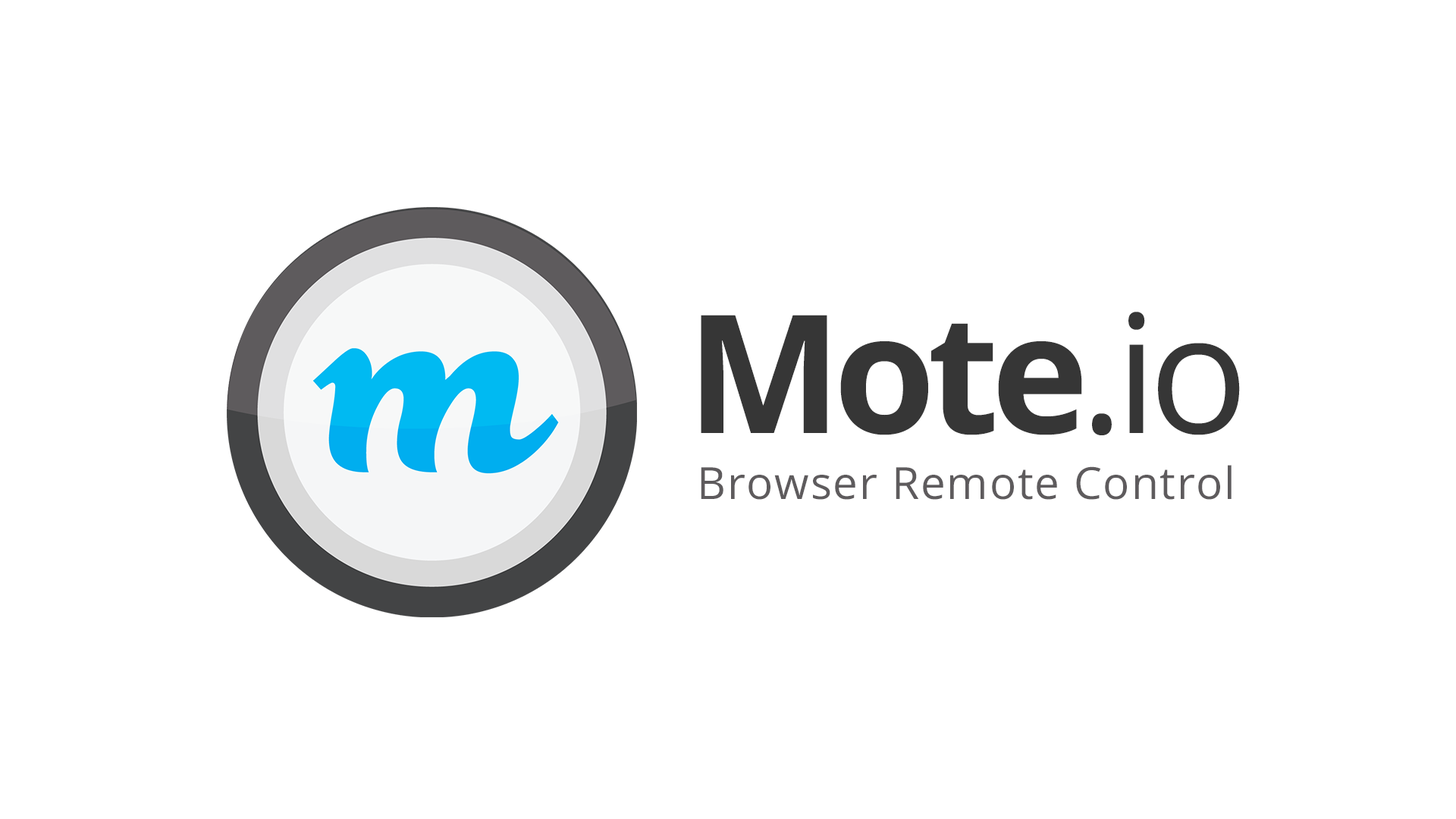
<style>
.page{position:relative;width:1456px;height:819px;background:#ffffff}
.page>*{position:absolute;margin:0}
.t1{font:164.9px "OpenSans-Bold";letter-spacing:-0.05em;color:#363636}
.t2{font:164.9px "OpenSans";letter-spacing:-0.05em;color:#363636}
.t3{font:44.4px "OpenSans";letter-spacing:0.03em;color:#5e5b5d}
</style>
<div class="page">
<p class="t1" style="left:701px;top:312px;width:539px;height:123px">Mote<span class="t2">.io</span></p>
<p class="t3" style="left:701px;top:465px;width:531px;height:35px">Browser Remote Control</p>
</div>
